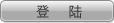
<style>
.page{position:relative;width:114px;height:23px}
.page>*{position:absolute;margin:0}
.t1{font:14px "SIL-Hei-Med-Jian";color:#3b3b3b}
</style>
<div class="page">
<p class="t1" style="left:36px;top:5px;width:46px;height:14px">登    陆</p>
</div>
